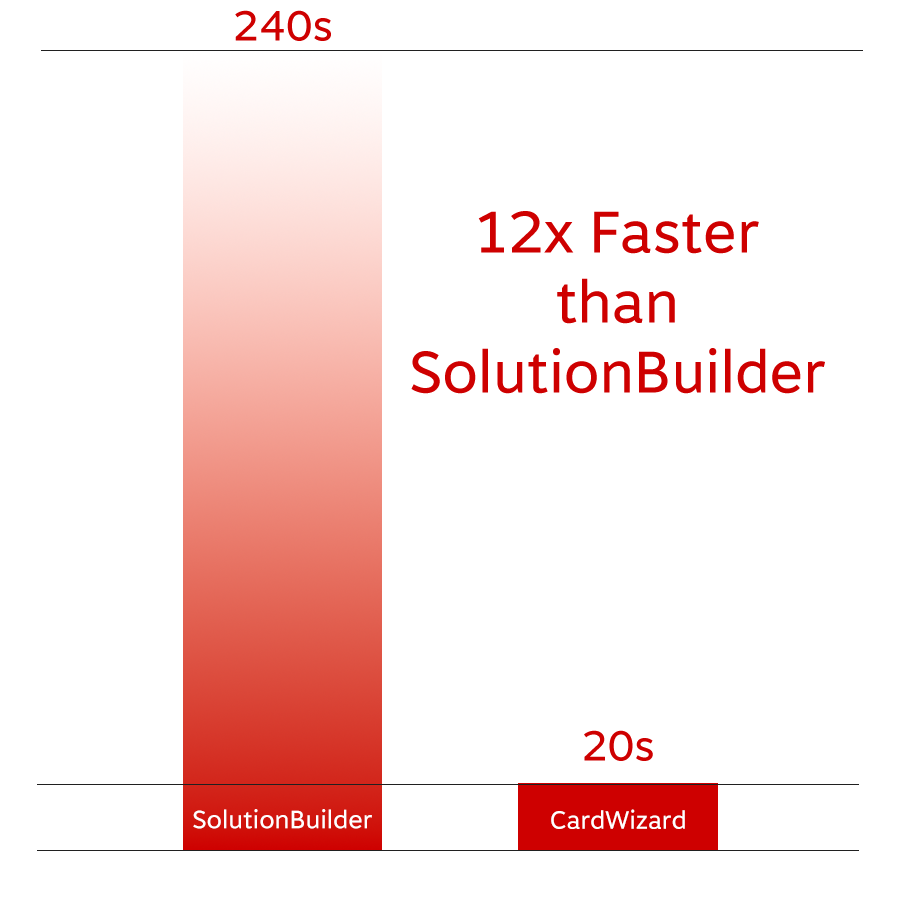
<style>
.page{position:relative;width:900px;height:900px;background:#ffffff}
.page>*{position:absolute;margin:0}
.t1{font:41.7px "MotivaSans-Regular";color:#ce0000}
.t2{font:58.3px "MotivaSans-Regular";color:#ce0000}
.t3{font:25px "MotivaSans-Regular";color:#ffffff}
</style>
<div class="page">
<p class="t1" style="left:235px;top:10px;width:96px;height:31px">240s</p>
<p class="t2" style="left:411px;top:211px;width:414px;height:183px;text-align:center">12x Faster than SolutionBuilder</p>
<p class="t1" style="left:584px;top:730px;width:69px;height:31px">20s</p>
<p class="t3" style="left:193px;top:809px;width:179px;height:20px">SolutionBuilder</p>
<p class="t3" style="left:551px;top:809px;width:134px;height:20px">CardWizard</p>
</div>
